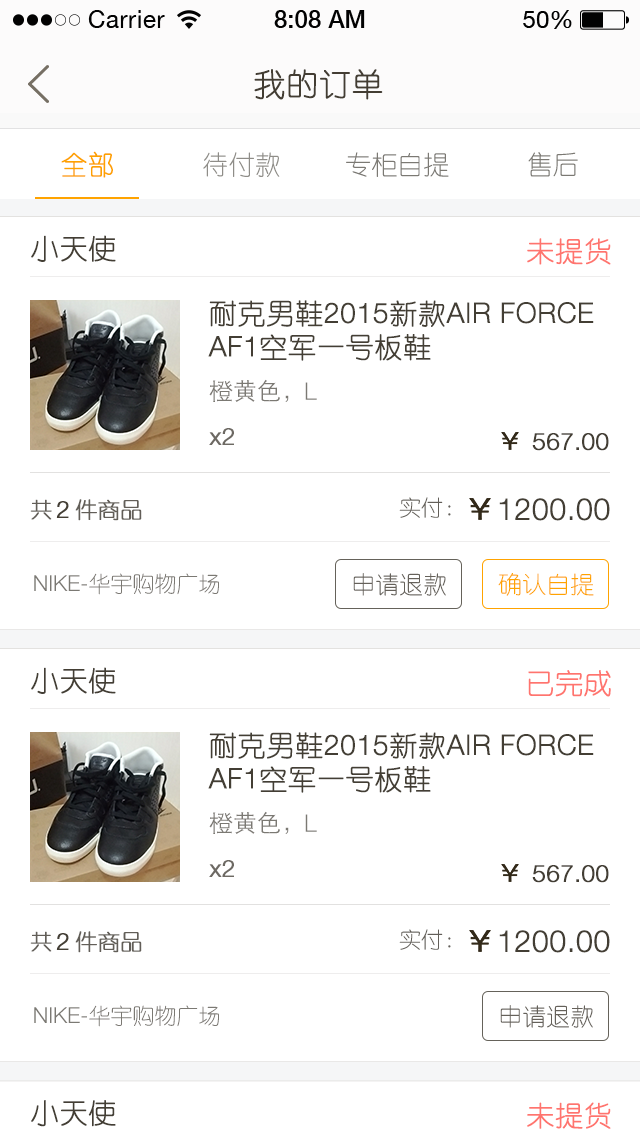
<style>
.page{position:relative;width:640px;height:1136px;background:#ffffff}
.page>*{position:absolute;margin:0}
.t1{font:32px "YouYuan";color:#433d33;text-transform:uppercase;font-weight:bold}
.t2{font:26.4px "YouYuan";color:#fea200;text-transform:uppercase;font-weight:bold}
.t3{font:26.4px "YouYuan";color:#8f8d88;text-transform:uppercase}
.t4{font:26.4px "YouYuan";color:#7b7973;text-transform:uppercase}
.t5{font:28px "YouYuan";color:#433e34;text-transform:uppercase;font-weight:bold}
.t6{font:28px "YouYuan";color:#ff5f57;text-transform:uppercase;font-weight:bold}
.t7{font:28px "HelveticaNeueLTPro-Lt";color:#433e34;text-transform:uppercase;font-weight:bold}
.t8{font:24px "STHeitiSC-Light";color:#7b7973;text-transform:uppercase}
.t9{font:24px "HelveticaNeueLTPro-Lt";color:#7b7973;text-transform:uppercase}
.t10{font:24px "HelveticaNeueLTPro-Lt";color:#6d6963;font-weight:bold}
.t11{font:24px "HelveticaNeueLTPro-Lt";color:#433e34;text-transform:uppercase;font-weight:bold}
.t12{font:22px "YouYuan";color:#625e58;text-transform:uppercase}
.t13{font:22px "YouYuan";color:#625e58;text-transform:uppercase;font-weight:bold}
.t14{font:30px "HelveticaNeueLTPro-Lt";color:#433e34;text-transform:uppercase;font-weight:bold}
.t15{font:22px "YouYuan";color:#7b7973;text-transform:uppercase}
.t16{font:22px "HelveticaNeueLTPro-Lt";color:#7b7973;text-transform:uppercase}
.t17{font:24px "YouYuan";color:#65615a;text-transform:uppercase}
.t18{font:24px "YouYuan";color:#ffa300;text-transform:uppercase}
</style>
<div class="page">
<p class="t1" style="left:254px;top:69px;width:129px;height:31px">我的订单</p>
<p class="t2" style="left:61px;top:151px;width:52px;height:27px">全部</p>
<p class="t3" style="left:203px;top:152px;width:77px;height:25px">待付款</p>
<p class="t4" style="left:346px;top:152px;width:103px;height:25px">专柜自提</p>
<p class="t4" style="left:528px;top:152px;width:50px;height:25px">售后</p>
<p class="t5" style="left:31px;top:235px;width:85px;height:27px">小天使</p>
<p class="t6" style="left:527px;top:238px;width:84px;height:27px;opacity:0.9">未提货</p>
<p class="t7" style="left:208px;top:300px;width:386px;height:61px"><span class="t5">耐克男鞋</span>2015<span class="t5">新款</span>air force AF1<span class="t5">空军一号板鞋</span></p>
<p class="t8" style="left:209px;top:379px;width:80px;height:23px">橙黄色，</p>
<p class="t9" style="left:305px;top:382px;width:12px;height:18px">L</p>
<p class="t10" style="left:209px;top:428px;width:25px;height:17px">x2</p>
<p class="t11" style="left:532px;top:433px;width:77px;height:18px">567.00</p>
<p class="t12" style="left:399px;top:497px;width:52px;height:21px">实付：</p>
<p class="t13" style="left:30px;top:499px;width:22px;height:21px">共</p>
<p class="t11" style="left:56px;top:501px;width:13px;height:17px">2</p>
<p class="t13" style="left:75px;top:499px;width:67px;height:22px">件商品</p>
<p class="t14" style="left:499px;top:498px;width:111px;height:23px">1200.00</p>
<p class="t15" style="left:34px;top:573px;width:185px;height:22px"><span class="t16">NIKE-</span>华宇购物广场</p>
<p class="t17" style="left:353px;top:573px;width:93px;height:23px">申请退款</p>
<p class="t18" style="left:498px;top:573px;width:96px;height:23px">确认自提</p>
<p class="t5" style="left:31px;top:667px;width:85px;height:27px">小天使</p>
<p class="t6" style="left:528px;top:670px;width:83px;height:27px;opacity:0.9">已完成</p>
<p class="t7" style="left:208px;top:732px;width:386px;height:61px"><span class="t5">耐克男鞋</span>2015<span class="t5">新款</span>air force AF1<span class="t5">空军一号板鞋</span></p>
<p class="t8" style="left:209px;top:811px;width:80px;height:23px">橙黄色，</p>
<p class="t9" style="left:305px;top:814px;width:12px;height:18px">L</p>
<p class="t10" style="left:209px;top:860px;width:25px;height:17px">x2</p>
<p class="t11" style="left:532px;top:865px;width:77px;height:18px">567.00</p>
<p class="t12" style="left:399px;top:929px;width:52px;height:21px">实付：</p>
<p class="t13" style="left:30px;top:931px;width:22px;height:21px">共</p>
<p class="t11" style="left:56px;top:933px;width:13px;height:17px">2</p>
<p class="t13" style="left:75px;top:931px;width:67px;height:22px">件商品</p>
<p class="t14" style="left:499px;top:930px;width:111px;height:23px">1200.00</p>
<p class="t15" style="left:34px;top:1005px;width:185px;height:22px"><span class="t16">NIKE-</span>华宇购物广场</p>
<p class="t17" style="left:500px;top:1005px;width:93px;height:23px">申请退款</p>
<p class="t5" style="left:31px;top:1100px;width:85px;height:27px">小天使</p>
<p class="t6" style="left:527px;top:1102px;width:84px;height:27px;opacity:0.9">未提货</p>
</div>
